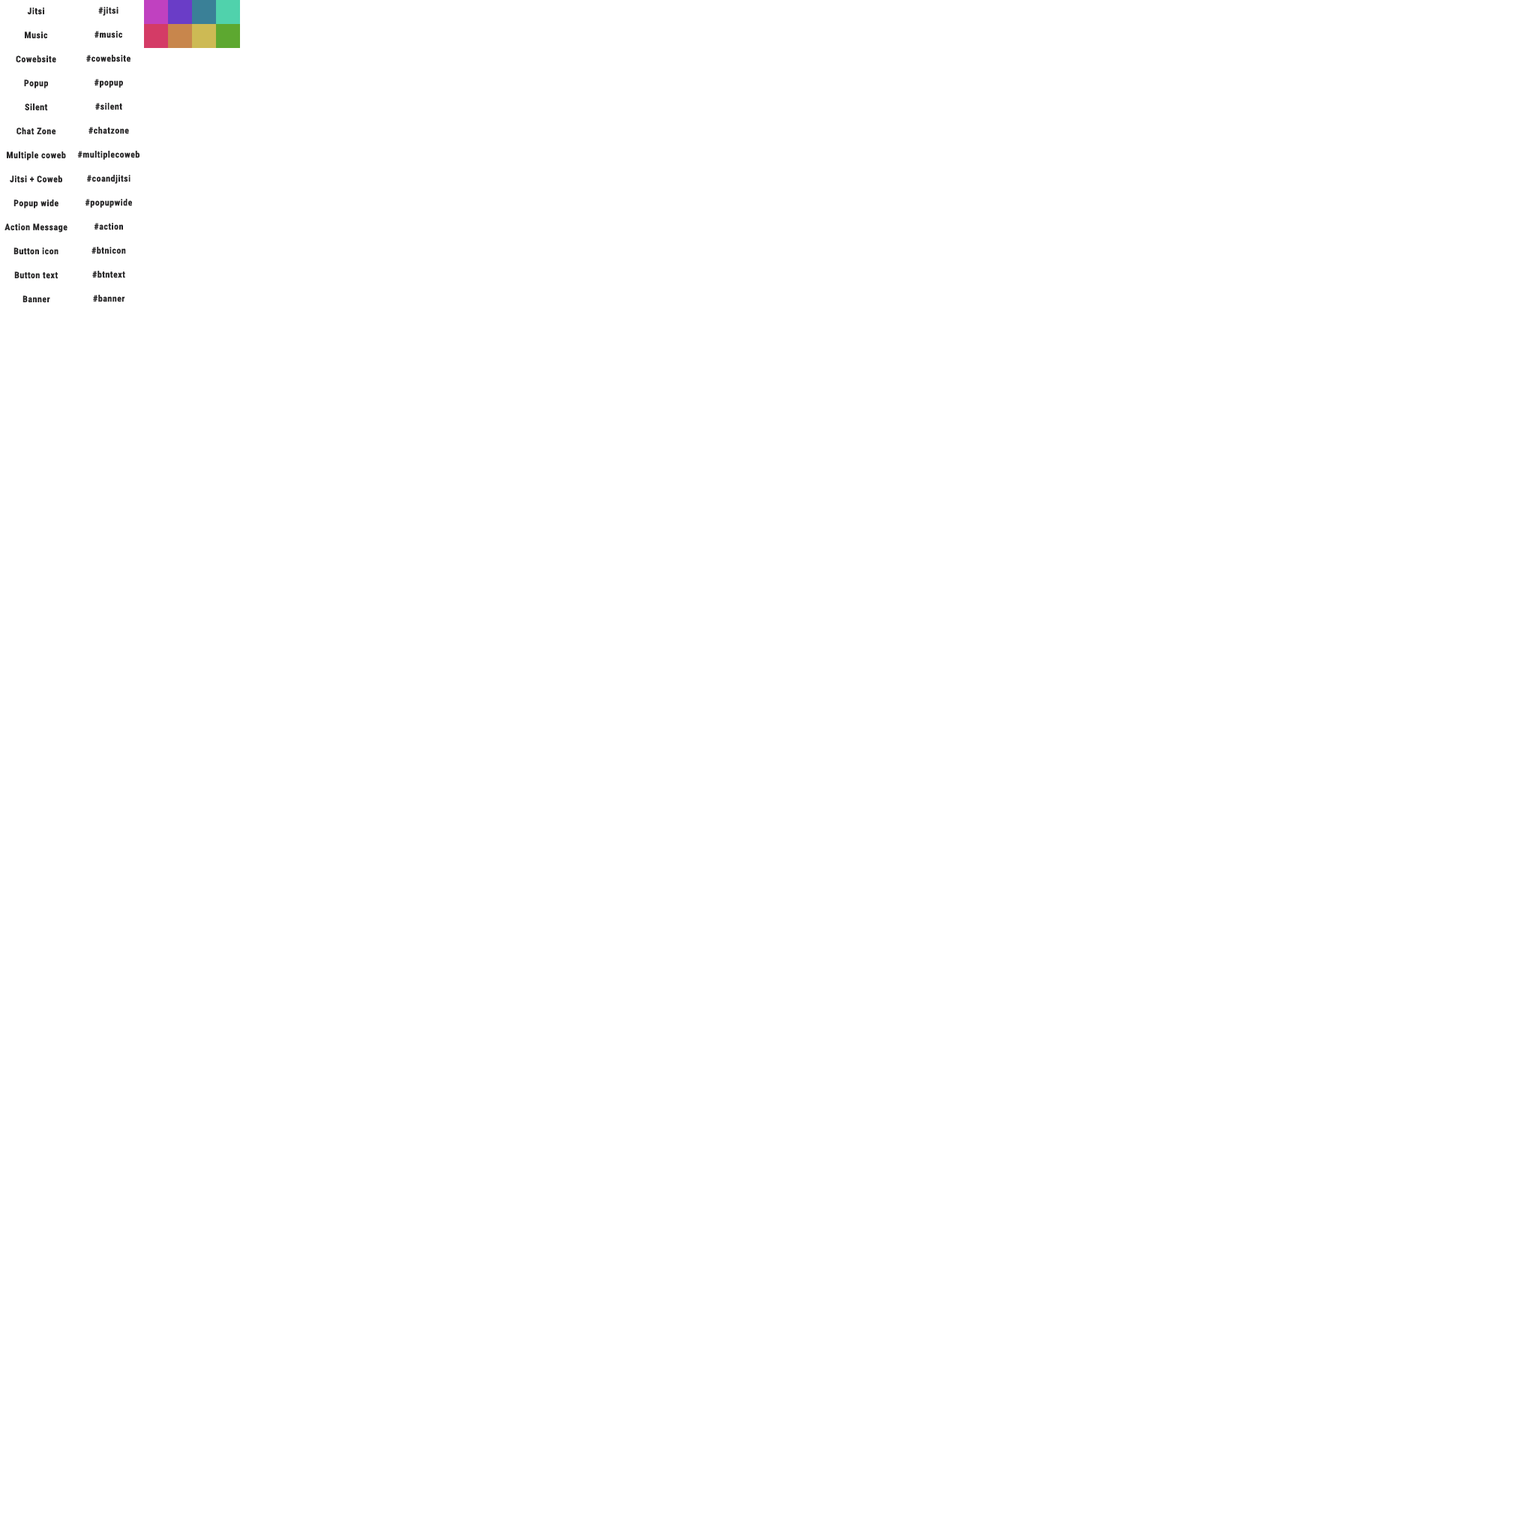
<style>
.page{position:relative;width:1536px;height:1536px;background:#ffffff}
.page>*{position:absolute;margin:0}
.t1{font:9px "RobotoCondensed-Bold";letter-spacing:0.04em;color:#282728}
</style>
<div class="page">
<p class="t1" style="left:27px;top:8px;width:17px;height:7px">Jitsi</p>
<p class="t1" style="left:98px;top:7px;width:20px;height:9px">#jitsi</p>
<p class="t1" style="left:25px;top:32px;width:23px;height:7px">Music</p>
<p class="t1" style="left:94px;top:31px;width:29px;height:7px">#music</p>
<p class="t1" style="left:16px;top:56px;width:40px;height:7px">Cowebsite</p>
<p class="t1" style="left:86px;top:55px;width:44px;height:7px">#cowebsite</p>
<p class="t1" style="left:24px;top:80px;width:24px;height:8px">Popup</p>
<p class="t1" style="left:94px;top:79px;width:29px;height:9px">#popup</p>
<p class="t1" style="left:25px;top:104px;width:23px;height:7px">Silent</p>
<p class="t1" style="left:95px;top:103px;width:27px;height:7px">#silent</p>
<p class="t1" style="left:16px;top:128px;width:40px;height:7px">Chat Zone</p>
<p class="t1" style="left:88px;top:127px;width:41px;height:7px">#chatzone</p>
<p class="t1" style="left:7px;top:152px;width:59px;height:8px">Multiple coweb</p>
<p class="t1" style="left:77px;top:151px;width:63px;height:9px">#multiplecoweb</p>
<p class="t1" style="left:10px;top:176px;width:52px;height:7px">Jitsi + Coweb</p>
<p class="t1" style="left:87px;top:175px;width:43px;height:9px">#coandjitsi</p>
<p class="t1" style="left:14px;top:200px;width:44px;height:8px">Popup wide</p>
<p class="t1" style="left:85px;top:199px;width:47px;height:9px">#popupwide</p>
<p class="t1" style="left:4px;top:224px;width:64px;height:8px">Action Message</p>
<p class="t1" style="left:94px;top:223px;width:29px;height:7px">#action</p>
<p class="t1" style="left:14px;top:248px;width:44px;height:7px">Button icon</p>
<p class="t1" style="left:92px;top:247px;width:34px;height:7px">#btnicon</p>
<p class="t1" style="left:14px;top:272px;width:44px;height:7px">Button text</p>
<p class="t1" style="left:92px;top:271px;width:33px;height:7px">#btntext</p>
<p class="t1" style="left:22px;top:296px;width:28px;height:7px">Banner</p>
<p class="t1" style="left:93px;top:295px;width:32px;height:7px">#banner</p>
</div>
